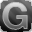
<style>
.page{position:relative;width:32px;height:32px}
.page>*{position:absolute;margin:0}
.t1{font:37.5px "AlteHaasGrotesk_Bold"}
</style>
<div class="page">
<p class="t1" style="left:2px;top:2px;width:26px;height:28px">G</p>
</div>
